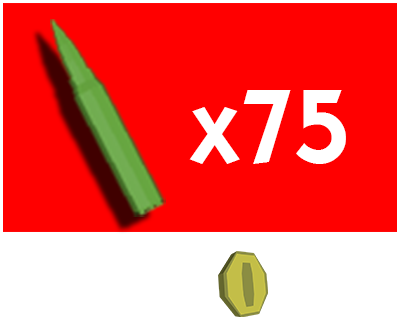
<style>
.page{position:relative;width:400px;height:330px;background:#ff0000}
.page>*{position:absolute;margin:0}
.t1{font:100px "ELEGANCE";color:#ffffff}
</style>
<div class="page">
<p class="t1" style="left:189px;top:90px;width:157px;height:74px">x75</p>
</div>
